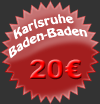
<style>
.page{position:relative;width:100px;height:104px;background:#333333}
.page>*{position:absolute;margin:0}
.t1{font:12px "HoboStd";color:#ffffff}
.t2{font:26.9px "Arial-Black"}
</style>
<div class="page">
<p class="t1" style="left:8px;top:14px;width:80px;height:45px;text-align:center;rotate:-16deg">Karlsruhe<br>Baden-Baden</p>
<p class="t2" style="left:29px;top:59px;width:53px;height:21px">20€</p>
</div>
